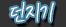
<style>
.page{position:relative;width:66px;height:27px;background:#333333}
.page>*{position:absolute;margin:0}
.t1{font:27px "KCC-eunyoung-Regular";color:#ffffff}
</style>
<div class="page">
<p class="t1" style="left:10px;top:2px;width:44px;height:20px">던지기</p>
</div>
